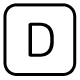
<style>
.page{position:relative;width:80px;height:80px;background:#ffffff}
.page>*{position:absolute;margin:0}
.t1{font:48px "NanumSquareRoundR";color:#000000}
</style>
<div class="page">
<p class="t1" style="left:28px;top:22px;width:26px;height:35px">D</p>
</div>
